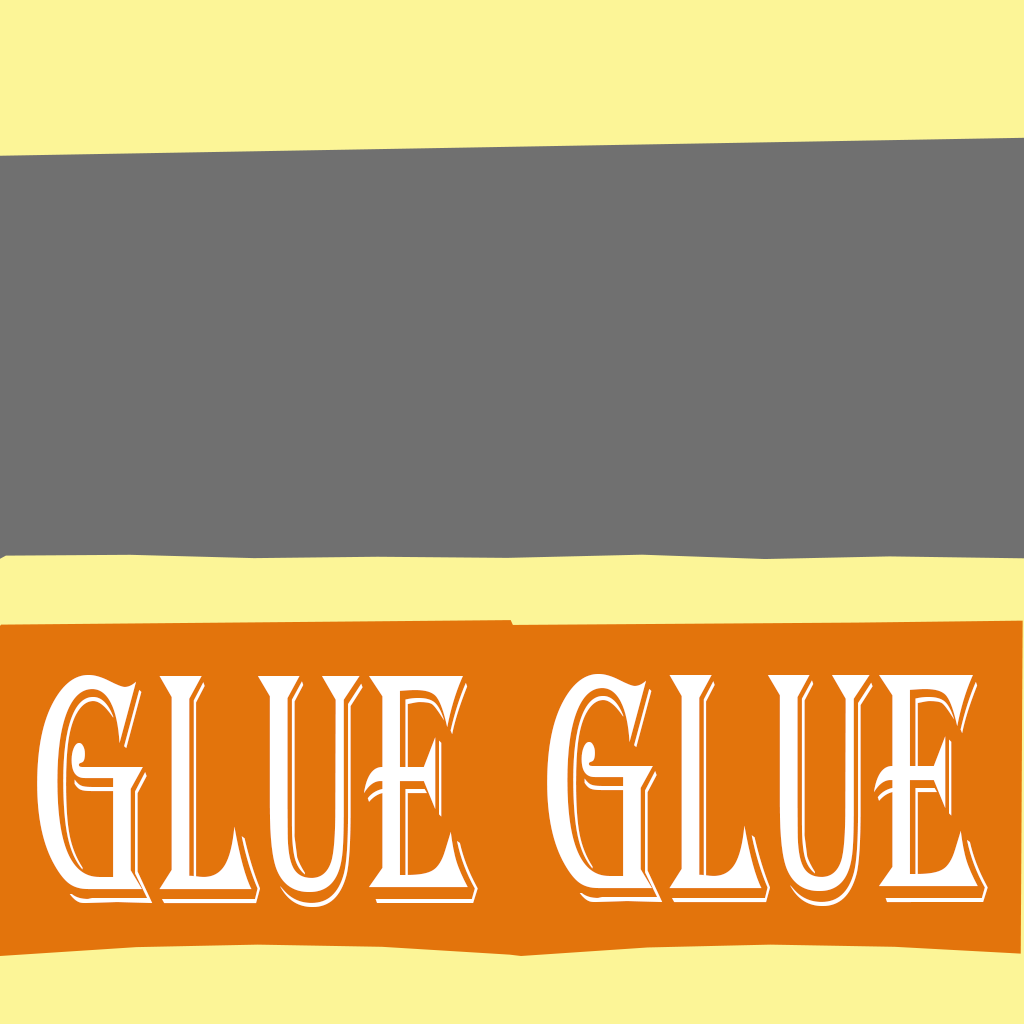
<style>
.page{position:relative;width:1024px;height:1024px;background:#707070}
.page>*{position:absolute;margin:0}
.t1{font:339.7px "Algerian";color:#ffffff;scale:0.53 1}
</style>
<div class="page">
<p class="t1" style="left:37px;top:675px;width:441px;height:232px">GLUE</p>
<p class="t1" style="left:547px;top:674px;width:441px;height:232px">GLUE</p>
</div>
